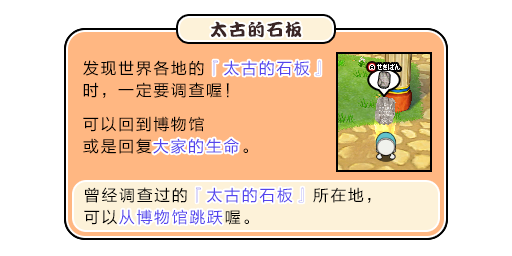
<style>
.page{position:relative;width:512px;height:256px;background:#ffffff}
.page>*{position:absolute;margin:0}
.t1{font:17px "DFPKanTingLiuW9";letter-spacing:0.1em;color:#3b2626}
.t2{font:16px/22px "FZLTHJW--GB1-0";letter-spacing:0.1em;color:#000000}
.t3{font:16px/22px "FZLTHJW--GB1-0";letter-spacing:0.1em;color:#5444ed}
.t4{font:16px "FZLTHJW--GB1-0";letter-spacing:0.1em;color:#5444ed}
</style>
<div class="page">
<p class="t1" style="left:211px;top:21px;width:91px;height:17px">太古的石板</p>
<p class="t2" style="left:83px;top:60px;width:238px;height:38px">发现世界各地的<span class="t3">『太古的石板』<br></span>时，一定要调查喔！</p>
<p class="t4" style="left:213px;top:60px;width:108px;height:16px">『太古的石板』</p>
<p class="t2" style="left:83px;top:116px;width:165px;height:38px">可以回到博物馆<br>或是回复<span class="t3">大家的生命</span>。</p>
<p class="t4" style="left:153px;top:138px;width:86px;height:16px">大家的生命</p>
<p class="t3" style="left:84px;top:187px;width:287px;height:38px"><span class="t2">曾经调查过的</span>『太古的石板』<span class="t2">所在地，<br>可以</span>从博物馆跳跃<span class="t2">喔。</span></p>
<p class="t4" style="left:196px;top:187px;width:108px;height:16px">『太古的石板』</p>
<p class="t4" style="left:119px;top:209px;width:104px;height:16px">从博物馆跳跃</p>
</div>
